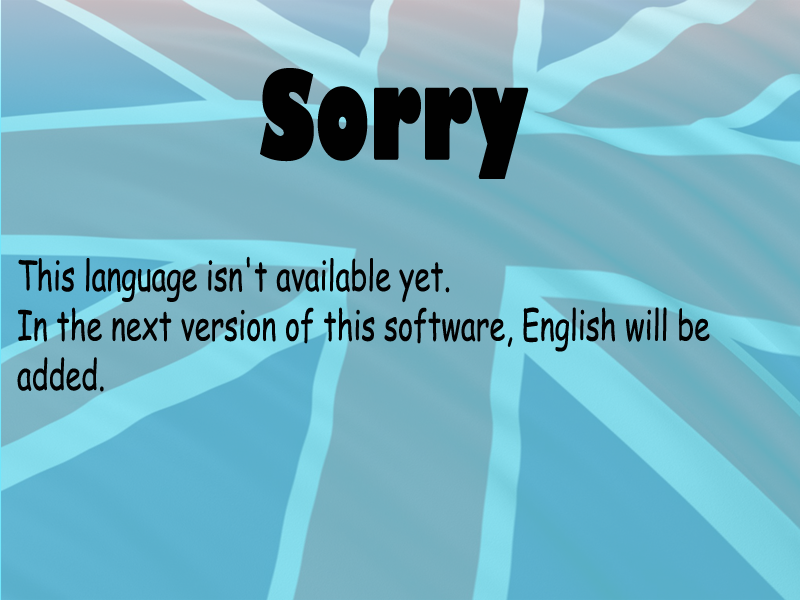
<style>
.page{position:relative;width:800px;height:600px}
.page>*{position:absolute;margin:0}
.t1{font:116.7px "GillSans-UltraBold";color:#010101;font-weight:bold;scale:0.63 1}
.t2{font:41.3px "ComicSansMS";color:#010101;scale:0.7 1}
</style>
<div class="page">
<p class="t1" style="left:260px;top:68px;width:269px;height:111px">Sorry</p>
<p class="t2" style="left:17px;top:256px;width:693px;height:136px">This language isn't available yet. <br>In the next version of this software, English will be added. <br>Sorry for the inconvenience.</p>
</div>
